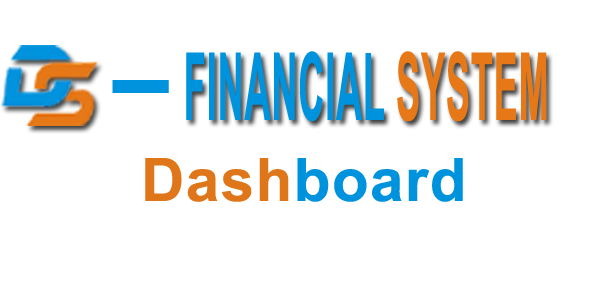
<style>
.page{position:relative;width:600px;height:300px;background:#ffffff}
.page>*{position:absolute;margin:0}
.t1{font:94.2px "Arial-BoldMT";letter-spacing:0.025em;color:#0093dd;scale:0.38 1}
.t2{font:94.2px "Arial-BoldMT";letter-spacing:0.025em;color:#e67817;scale:0.38 1}
.t3{font:94.2px "Arial-BoldMT";letter-spacing:0.025em;color:#0093dd;scale:2.2 1}
.t4{font:60px "Arial-BoldMT";letter-spacing:0.025em;color:#0093dd}
.t5{font:60px "Arial-BoldMT";letter-spacing:0.025em;color:#df761a}
</style>
<div class="page">
<p class="t1" style="left:186px;top:51px;width:361px;height:71px">FINANCIAL <span class="t2">SYSTEM</span></p>
<p class="t3" style="left:112px;top:80px;width:57px;height:13px">-</p>
<p class="t4" style="left:145px;top:158px;width:318px;height:44px"><span class="t5">Dash</span>board</p>
</div>
